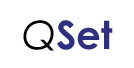
<style>
.page{position:relative;width:134px;height:68px;background:#ffffff}
.page>*{position:absolute;margin:0}
.t1{font:38.9px "CenturyGothic-Bold";color:#2f2f80}
.t2{font:38.9px "CenturyGothic-Italic";color:#000000}
</style>
<div class="page">
<p class="t1" style="left:23px;top:20px;width:90px;height:31px"><span class="t2">Q</span>Set</p>
</div>
